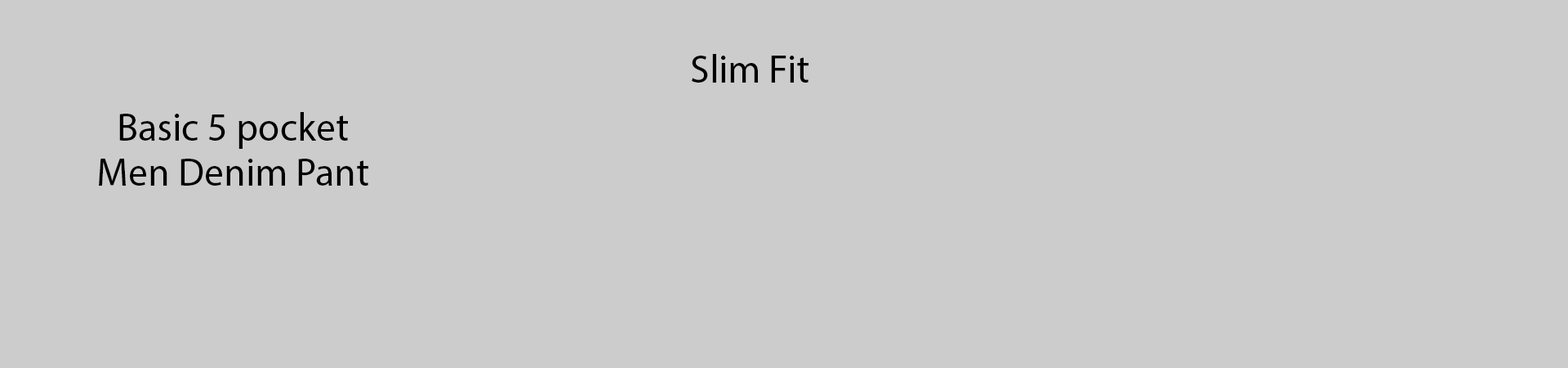
<style>
.page{position:relative;width:1568px;height:368px;background:#cccccc}
.page>*{position:absolute;margin:0}
.t1{font:39.2px "MyriadPro-Regular";color:#000000}
</style>
<div class="page">
<p class="t1" style="left:692px;top:54px;width:116px;height:28px">Slim Fit</p>
<p class="t1" style="left:119px;top:112px;width:229px;height:37px">Basic 5 pocket</p>
<p class="t1" style="left:99px;top:158px;width:269px;height:27px">Men Denim Pant</p>
</div>
